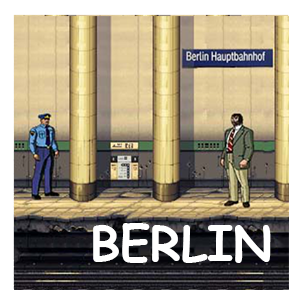
<style>
.page{position:relative;width:300px;height:300px}
.page>*{position:absolute;margin:0}
.t1{font:48px "ComicSansMS-Bold";color:#ffffff}
</style>
<div class="page">
<p class="t1" style="left:93px;top:223px;width:178px;height:40px">BERLIN</p>
</div>
